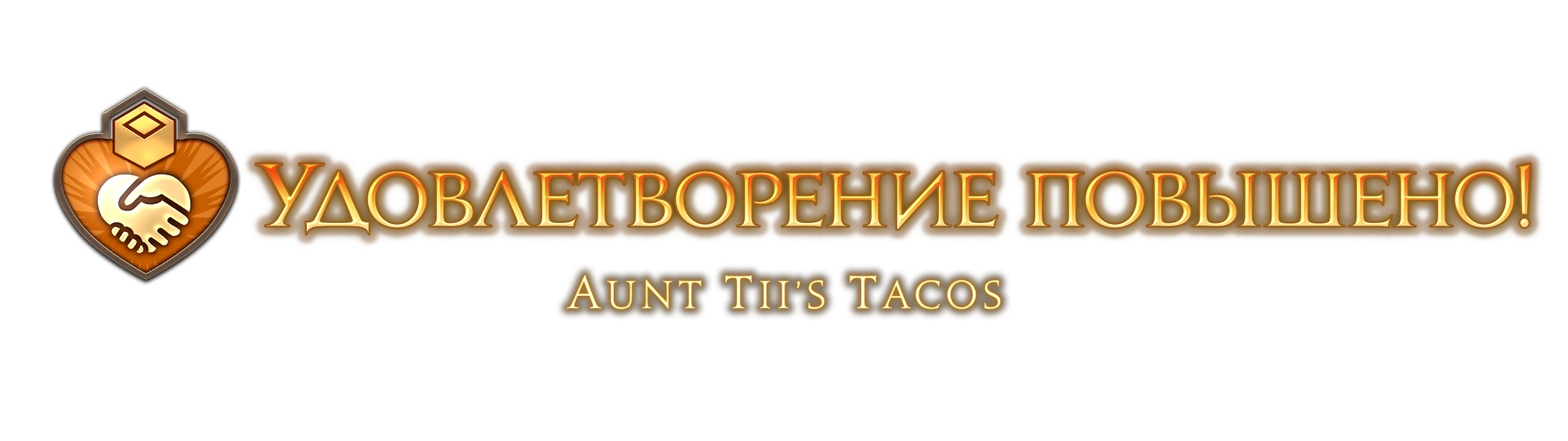
<style>
.page{position:relative;width:1568px;height:441px;background:#ffffff}
.page>*{position:absolute;margin:0}
.t1{font:70.5px "JupiterProRus-Bold";letter-spacing:-0.02em}
.t2{font:81.9px "JupiterProRus-Bold";letter-spacing:-0.02em}
.t3{font:35.2px "JupiterProRus";letter-spacing:0.15em}
.t4{font:41.7px "JupiterProRus";letter-spacing:0.15em}
</style>
<div class="page">
<p class="t1" style="left:255px;top:163px;width:1276px;height:72px"><span class="t2">У</span>довлетворение повышено<span class="t2">!</span></p>
<p class="t1" style="left:255px;top:163px;width:1276px;height:72px"><span class="t2">У</span>довлетворение повышено<span class="t2">!</span></p>
<p class="t3" style="left:567px;top:275px;width:434px;height:34px"><span class="t4">A</span>unt <span class="t4">T</span>ii’s <span class="t4">T</span>acos</p>
</div>
